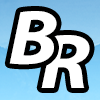
<style>
.page{position:relative;width:100px;height:100px;background:#ffffff}
.page>*{position:absolute;margin:0}
.t1{font:78px "MyriadPro-BoldIt";letter-spacing:0.05em;color:#ffffff;scale:1.1 1}
</style>
<div class="page">
<p class="t1" style="left:9px;top:11px;width:48px;height:54px">B</p>
<p class="t1" style="left:41px;top:35px;width:49px;height:53px">R</p>
</div>
